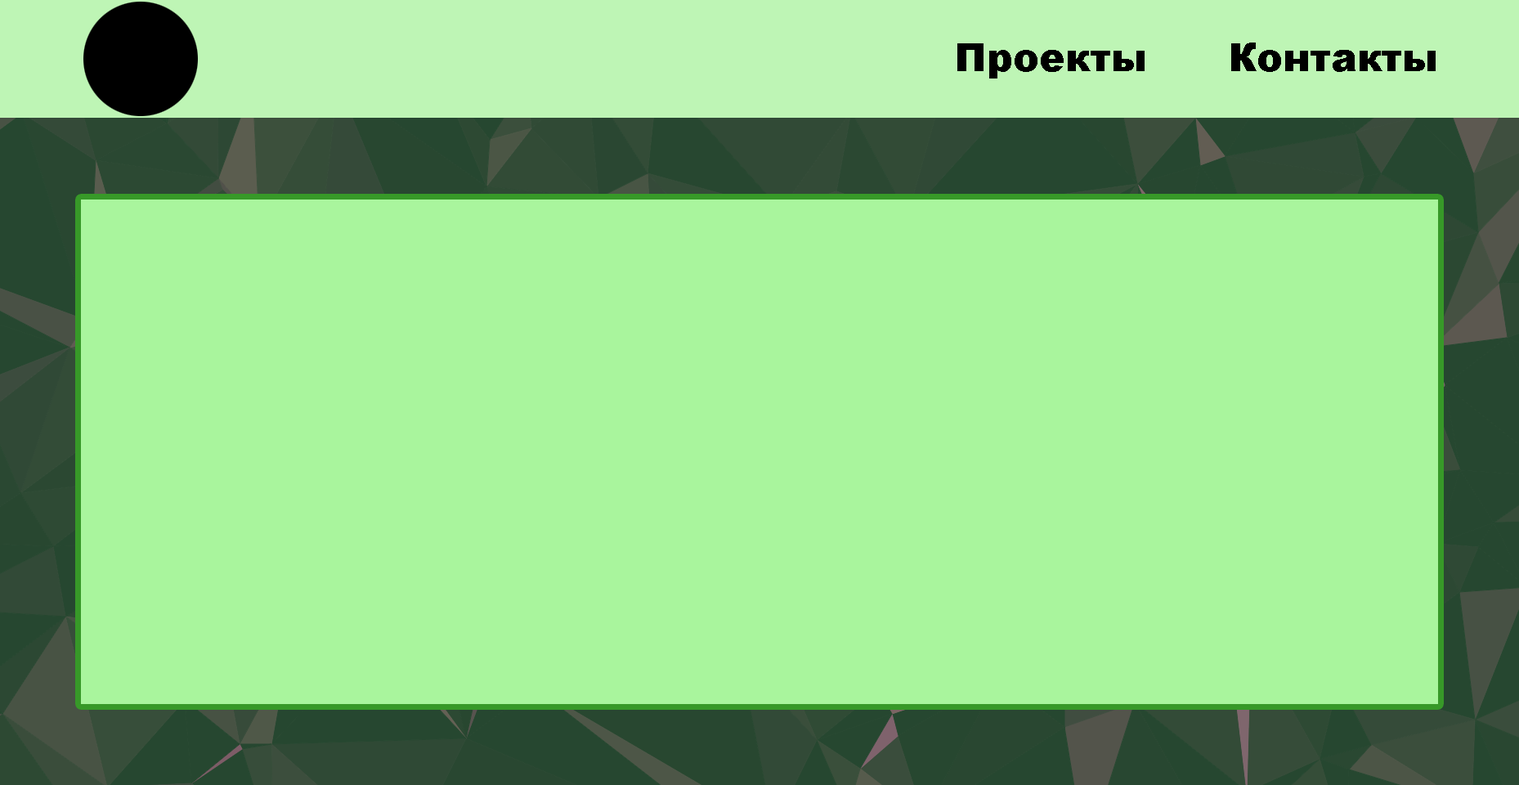
<style>
.page{position:relative;width:1519px;height:785px;background:#a9f59d}
.page>*{position:absolute;margin:0}
.t1{font:39.2px "Arial-Black";color:#000000}
</style>
<div class="page">
<p class="t1" style="left:957px;top:43px;width:188px;height:35px">Проекты</p>
<p class="t1" style="left:1231px;top:43px;width:205px;height:29px">Контакты</p>
</div>
